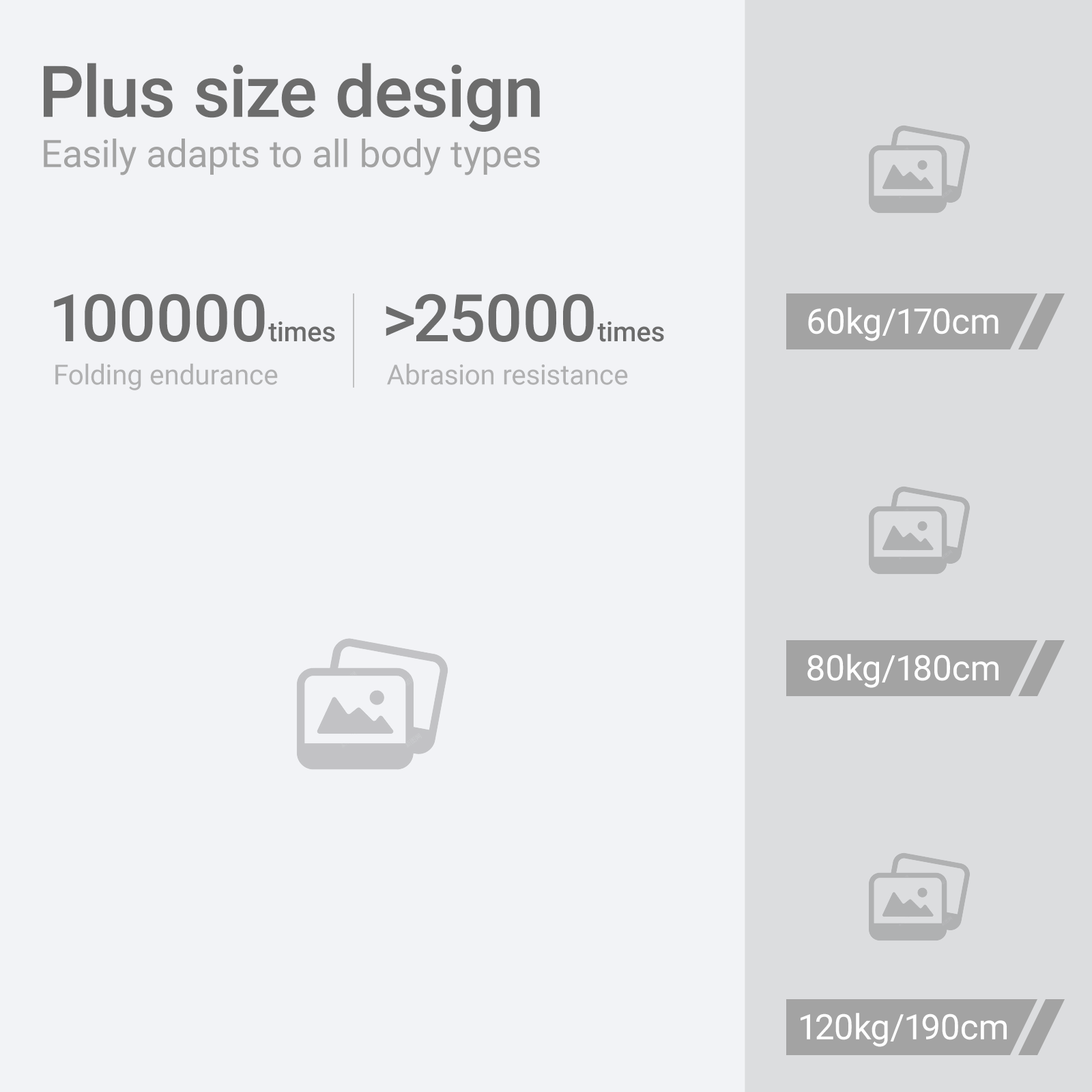
<style>
.page{position:relative;width:1092px;height:1092px;background:#f2f3f6}
.page>*{position:absolute;margin:0}
.t1{font:71.3px "Roboto-Medium";color:#6c6c6c}
.t2{font:37.9px "Roboto-Regular";color:#a3a3a3}
.t3{font:65.7px "Roboto-Medium";color:#6c6c6c}
.t4{font:27.2px "Roboto-Medium";color:#6c6c6c}
.t5{font:34.9px "Roboto-Regular";color:#ffffff}
.t6{font:27.7px "Roboto-Regular";color:#a3a3a3}
</style>
<div class="page">
<p class="t1" style="left:44px;top:63px;width:496px;height:69px">Plus size design</p>
<p class="t2" style="left:44px;top:139px;width:496px;height:36px">Easily adapts to all body types</p>
<p class="t3" style="left:54px;top:293px;width:281px;height:49px">100000<span class="t4">times</span></p>
<p class="t3" style="left:386px;top:293px;width:278px;height:49px">&gt;25000<span class="t4">times</span></p>
<p class="t5" style="left:808px;top:307px;width:190px;height:34px">60kg/170cm</p>
<p class="t6" style="left:55px;top:363px;width:223px;height:27px;opacity:0.85">Folding endurance</p>
<p class="t6" style="left:387px;top:363px;width:241px;height:22px;opacity:0.85">Abrasion resistance</p>
<p class="t5" style="left:807px;top:654px;width:191px;height:34px">80kg/180cm</p>
<p class="t5" style="left:801px;top:1013px;width:206px;height:34px">120kg/190cm</p>
</div>
